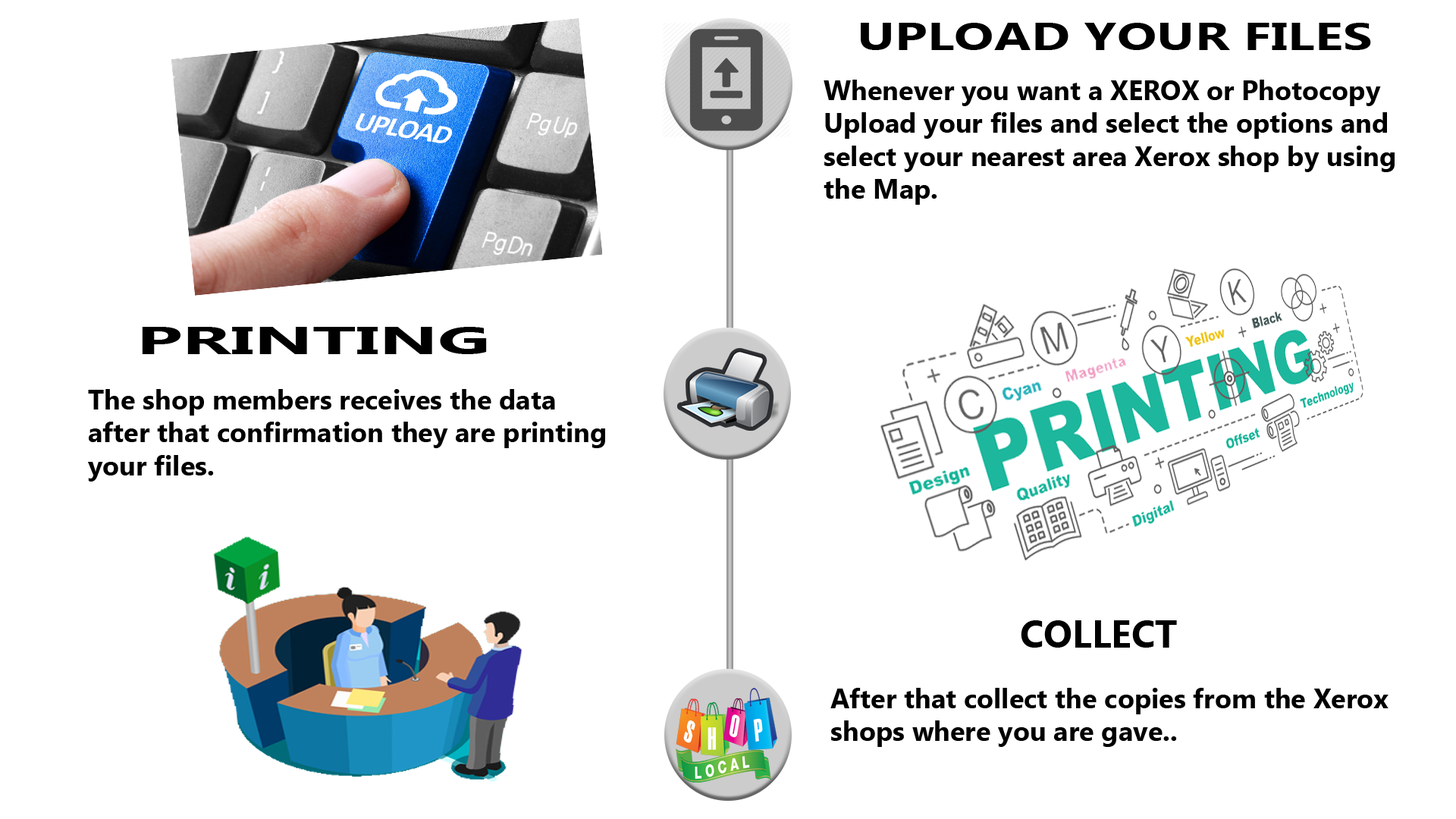
<style>
.page{position:relative;width:1456px;height:819px;background:#ffffff}
.page>*{position:absolute;margin:0}
.t1{font:37.9px "MicrosoftTaiLe-Bold";color:#000000;scale:1.39 1}
.t2{font:27.3px "MicrosoftTaiLe-Bold";color:#000000}
.t3{font:37.9px "MicrosoftTaiLe-Bold";color:#000000;scale:1.95 1}
.t4{font:37.9px "MicrosoftTaiLe-Bold";color:#000000}
</style>
<div class="page">
<p class="t1" style="left:861px;top:23px;width:510px;height:27px">UPLOAD YOUR FILES</p>
<p class="t2" style="left:824px;top:80px;width:571px;height:125px">Whenever you want a XEROX or Photocopy Upload your files and select the options and select your nearest area Xerox shop by using the Map.</p>
<p class="t3" style="left:142px;top:327px;width:345px;height:27px">PRINTING</p>
<p class="t2" style="left:88px;top:389px;width:517px;height:93px">The shop members receives the data after that confirmation they are printing your files.</p>
<p class="t4" style="left:1021px;top:620px;width:156px;height:28px">COLLECT</p>
<p class="t2" style="left:830px;top:688px;width:558px;height:59px">After that collect the copies from the Xerox shops where you are gave..</p>
</div>
